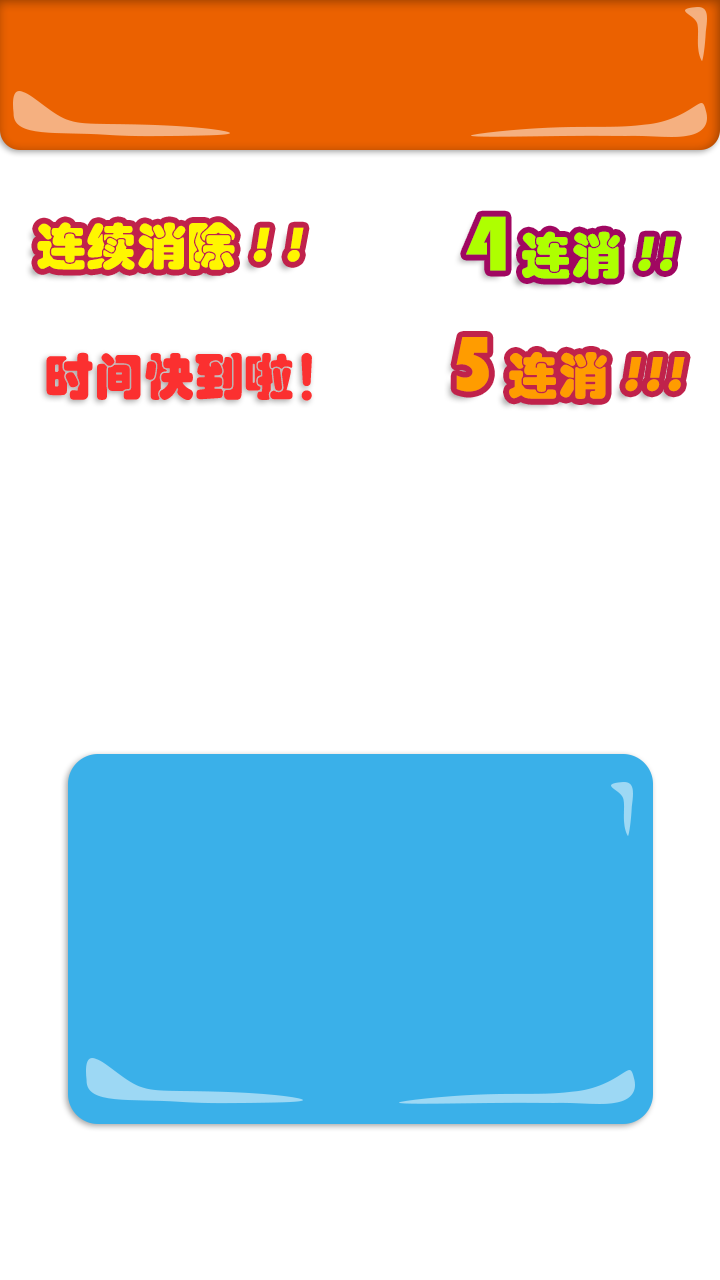
<style>
.page{position:relative;width:720px;height:1280px;background:#ffffff}
.page>*{position:absolute;margin:0}
.t1{font:50px "STHupo";color:#fff600}
.t2{font:50px "STHupo";color:#fff600;font-style:italic}
.t3{font:50px "STHupo";color:#aeff00}
.t4{font:80px "STHupo";color:#aeff00}
.t5{font:50px "STHupo";color:#aeff00;font-style:italic}
.t6{font:50px "STHupo";color:#ff9c00;font-style:italic}
.t7{font:80px "STHupo";color:#ff9c00}
.t8{font:50px "STHupo";color:#ff9c00}
.t9{font:50px "STHupo";color:#fb3030}
</style>
<div class="page">
<p class="t1" style="left:37px;top:222px;width:267px;height:48px">连续消除 <span class="t2">! !</span></p>
<p class="t3" style="left:466px;top:216px;width:210px;height:63px"><span class="t4">4</span> 连消 <span class="t5">!!</span></p>
<p class="t6" style="left:456px;top:337px;width:229px;height:62px"><span class="t7">5</span><span class="t8"> 连消 </span>!!!</p>
<p class="t9" style="left:46px;top:352px;width:266px;height:49px">时间快到啦！</p>
</div>
